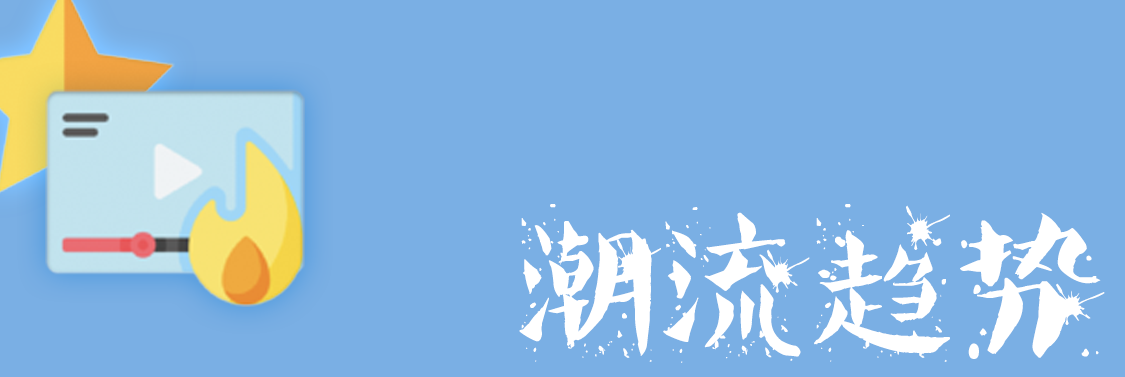
<style>
.page{position:relative;width:1125px;height:377px;background:#7aafe4}
.page>*{position:absolute;margin:0}
.t1{font:150px "yegenyoufont";letter-spacing:-0.003em;color:#ffffff}
</style>
<div class="page">
<p class="t1" style="left:519px;top:204px;width:586px;height:159px">潮流趋势</p>
</div>
